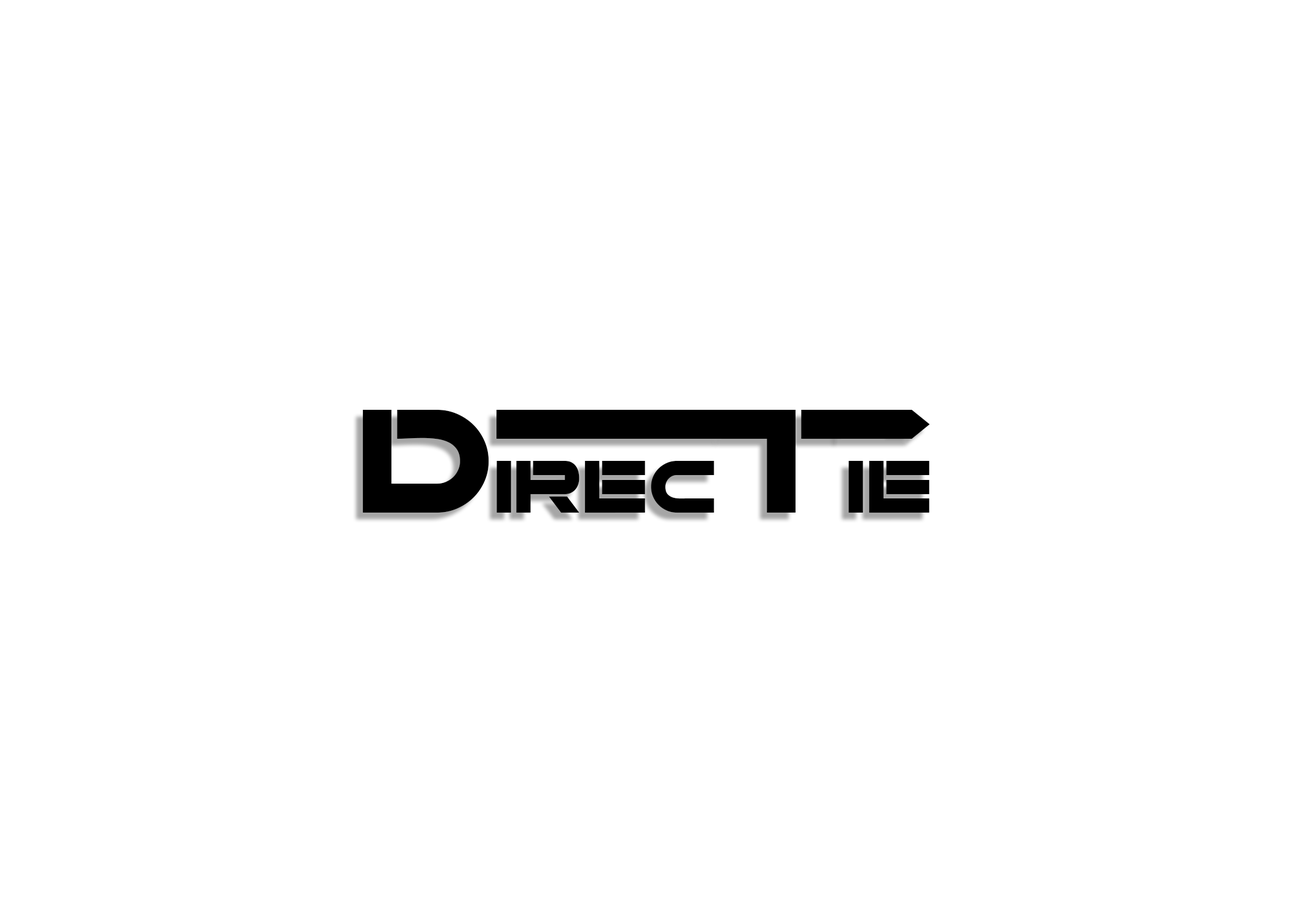
<style>
.page{position:relative;width:1292px;height:923px;background:#ffffff}
.page>*{position:absolute;margin:0}
.t1{font:76.9px "Forvertz-Regular";color:#000000}
.t2{font:153.8px "Forvertz-Regular";color:#000000}
</style>
<div class="page">
<p class="t1" style="left:362px;top:410px;width:568px;height:103px"><span class="t2">d</span>irec<span class="t2">t</span>ie</p>
</div>
